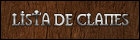
<style>
.page{position:relative;width:140px;height:40px}
.page>*{position:absolute;margin:0}
.t1{font:18.2px "Mason-Regular";letter-spacing:-0.07em;font-weight:bold;scale:0.79 1}
</style>
<div class="page">
<p class="t1" style="left:12px;top:10px;width:117px;height:16px">LISTA DE CLANES</p>
</div>
